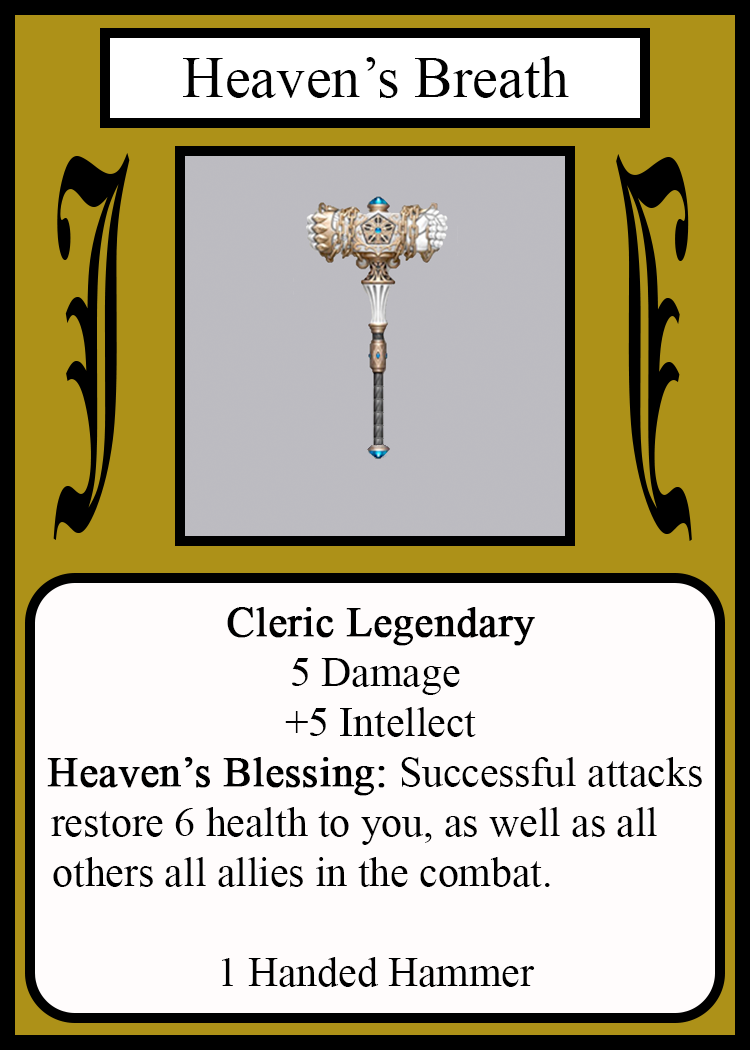
<style>
.page{position:relative;width:750px;height:1050px;background:#fffcfc}
.page>*{position:absolute;margin:0}
.t1{font:58.3px "TimesNewRomanPSMT";color:#010101}
.t2{font:450.1px "OldEnglishTextMT";color:#000000;scale:0.26 1}
.t3{font:449.7px "OldEnglishTextMT";color:#000000;scale:0.26 1}
.t4{font:41.7px "TimesNewRomanPSMT";color:#000000}
.t5{font:41.7px "TimesNewRomanPSMT";color:#000000;font-weight:bold}
</style>
<div class="page">
<p class="t1" style="left:183px;top:56px;width:386px;height:42px">Heaven’s Breath</p>
<p class="t2" style="left:53px;top:153px;width:77px;height:387px">J</p>
<p class="t3" style="left:616px;top:154px;width:76px;height:387px;rotate:180deg">J</p>
<p class="t4" style="left:47px;top:607px;width:655px;height:380px;text-align:center"><span class="t5">Cleric Legendary<br></span>5 Damage<br> +5 Intellect<br><span class="t5">Heaven’s Blessing:</span> Successful attacks<br>restore 6 health to you, as well as all    <br>others all allies in the combat.              <br>                                             <br> 1 Handed Hammer</p>
</div>
